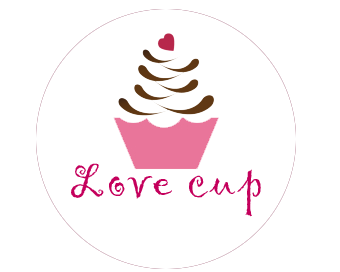
<style>
.page{position:relative;width:340px;height:272px;background:#ffffff}
.page>*{position:absolute;margin:0}
.t1{font:50px "Gigi-Regular";letter-spacing:0.05em;color:#c4005c}
</style>
<div class="page">
<p class="t1" style="left:71px;top:163px;width:190px;height:54px">Love cup</p>
</div>
